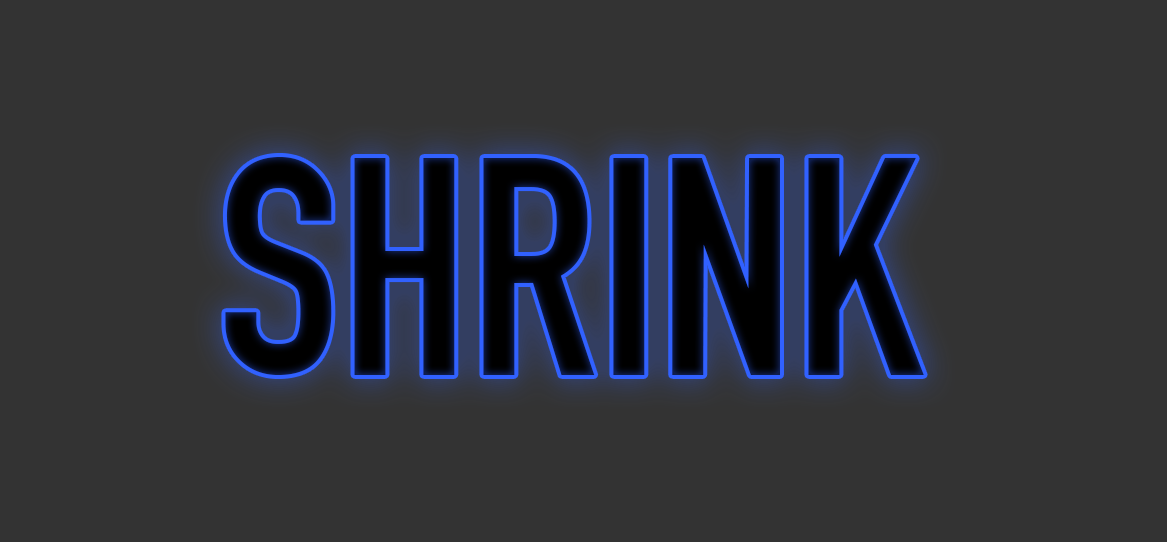
<style>
.page{position:relative;width:1167px;height:542px;background:#333333}
.page>*{position:absolute;margin:0}
.t1{font:302.5px "DINEngschrift";color:#010103}
</style>
<div class="page">
<p class="t1" style="left:225px;top:157px;width:699px;height:218px">SHRINK</p>
</div>
